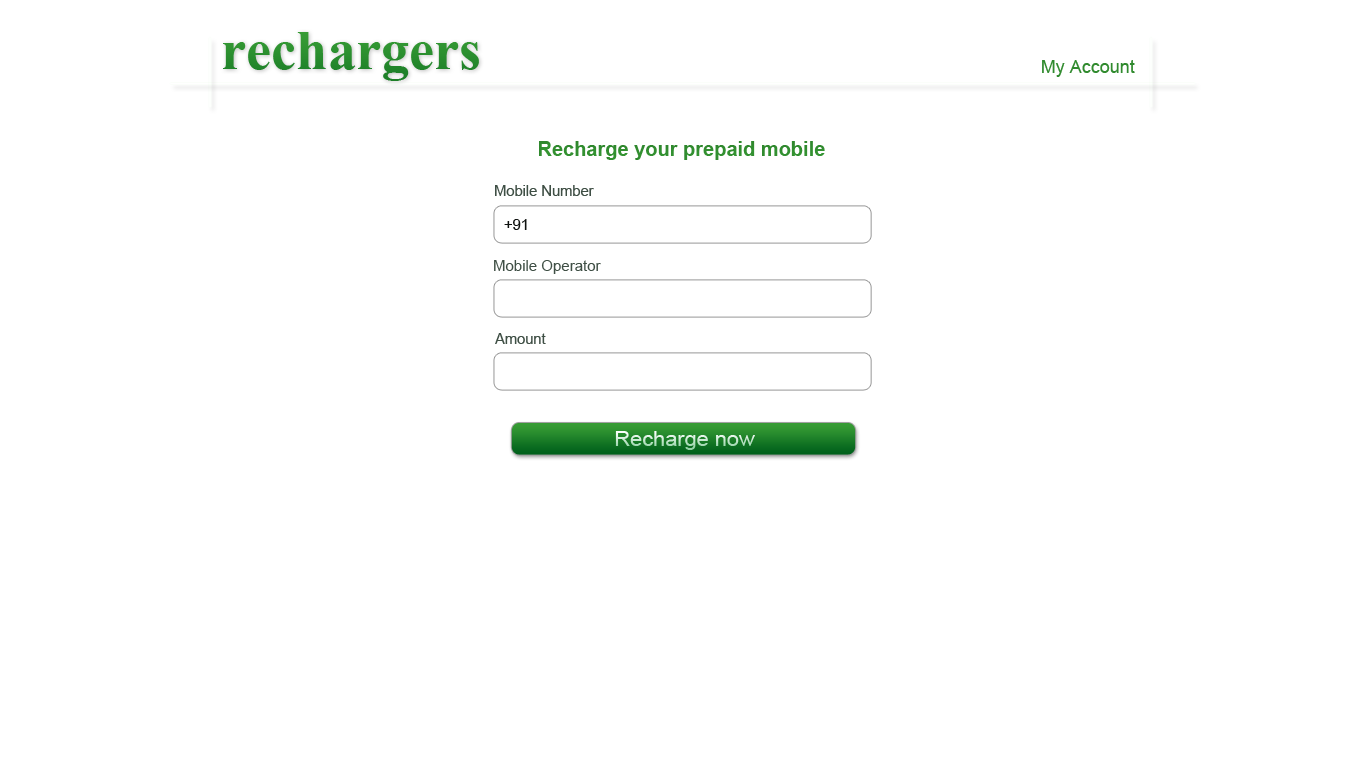
<style>
.page{position:relative;width:1366px;height:768px;background:#ffffff}
.page>*{position:absolute;margin:0}
.t1{font:70px "Aparajita-Bold";color:#369b34}
.t2{font:18px "ArialMT";color:#318c2f}
.t3{font:20px "Arial-BoldMT";color:#369b34}
.t4{font:15px "ArialMT";color:#3f4f45}
.t5{font:15px "ArialMT";color:#0f1210}
.t6{font:20.4px "ArialMT";scale:1.07 1}
</style>
<div class="page">
<p class="t1" style="left:223px;top:32px;width:256px;height:49px">rechargers</p>
<p class="t2" style="left:1042px;top:60px;width:93px;height:17px">My Account</p>
<p class="t3" style="left:539px;top:141px;width:286px;height:19px">Recharge your prepaid mobile</p>
<p class="t4" style="left:495px;top:185px;width:99px;height:11px">Mobile Number</p>
<p class="t5" style="left:504px;top:219px;width:23px;height:11px">+91</p>
<p class="t4" style="left:494px;top:260px;width:107px;height:14px">Mobile Operator</p>
<p class="t4" style="left:495px;top:333px;width:51px;height:11px">Amount</p>
<p class="t6" style="left:615px;top:431px;width:140px;height:19px">Recharge now</p>
</div>
